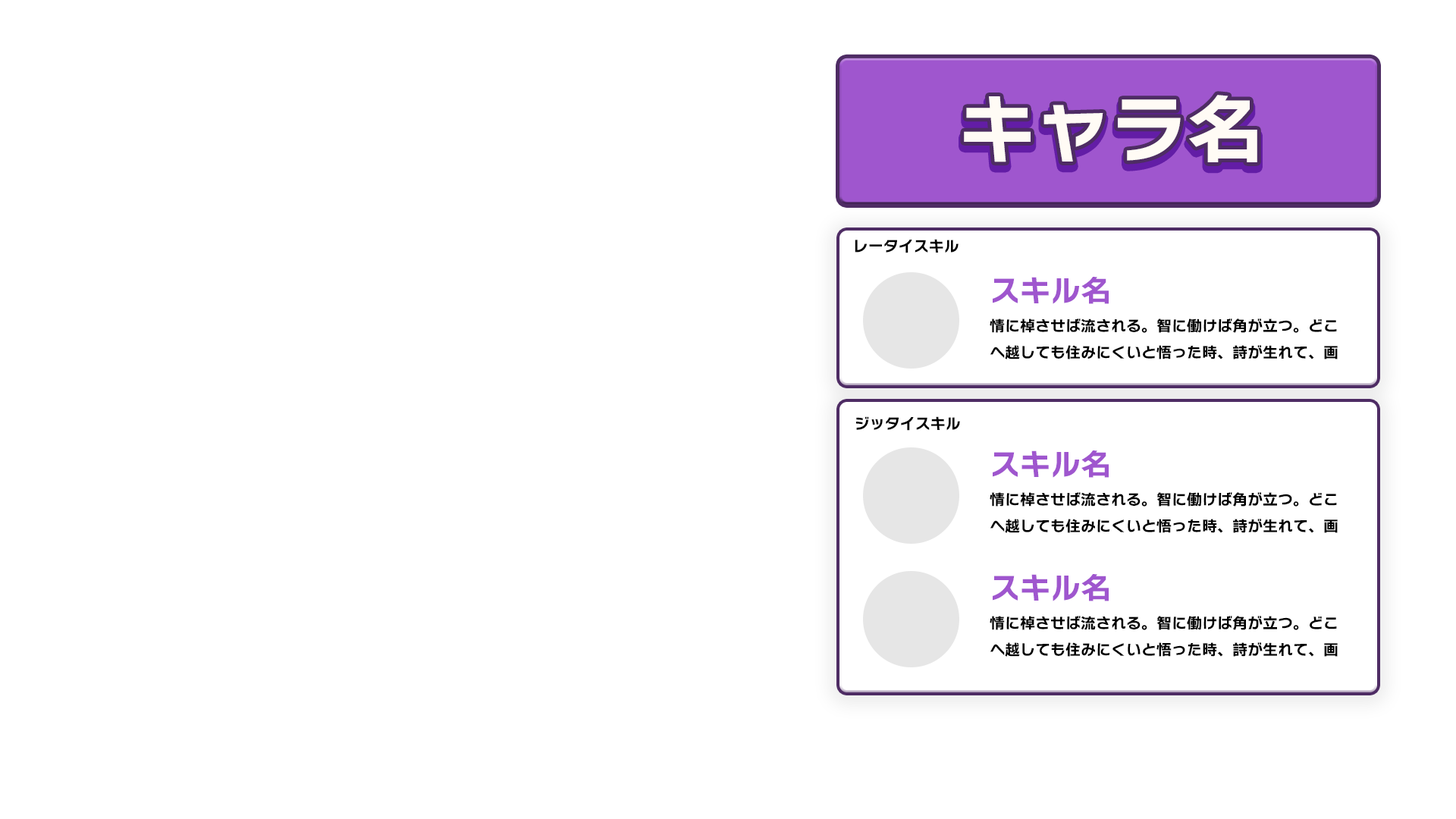
<style>
.page{position:relative;width:1456px;height:819px;background:#ffffff}
.page>*{position:absolute;margin:0}
.t1{font:75.8px "NitalagoRuika-06";color:#fffbf5}
.t2{font:15.2px "NitalagoRuika-06";color:#000000}
.t3{font:30.3px "NitalagoRuika-06";color:#9f56ce}
</style>
<div class="page">
<p class="t1" style="left:964px;top:95px;width:293px;height:67px">キャラ名</p>
<p class="t2" style="left:855px;top:239px;width:104px;height:14px">レータイスキル</p>
<p class="t3" style="left:993px;top:277px;width:116px;height:27px">スキル名</p>
<p class="t2" style="left:990px;top:318px;width:348px;height:41px">情に棹させば流される。智に働けば角が立つ。どこへ越しても住みにくいと悟った時、詩が生れて、画が出来る。とかくに人の世は住みにくい。意地を通</p>
<p class="t2" style="left:856px;top:416px;width:104px;height:15px">ジッタイスキル</p>
<p class="t3" style="left:993px;top:450px;width:116px;height:28px">スキル名</p>
<p class="t2" style="left:990px;top:492px;width:348px;height:41px">情に棹させば流される。智に働けば角が立つ。どこへ越しても住みにくいと悟った時、詩が生れて、画が出来る。とかくに人の世は住みにくい。意地を通</p>
<p class="t3" style="left:993px;top:574px;width:116px;height:27px">スキル名</p>
<p class="t2" style="left:990px;top:616px;width:348px;height:41px">情に棹させば流される。智に働けば角が立つ。どこへ越しても住みにくいと悟った時、詩が生れて、画が出来る。とかくに人の世は住みにくい。意地を通</p>
</div>
